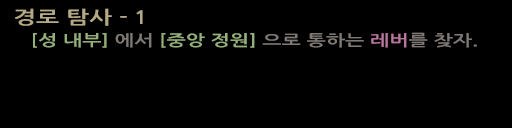
<style>
.page{position:relative;width:512px;height:128px;background:#000000}
.page>*{position:absolute;margin:0}
.t1{font:18px "NanumGothicBold";color:#b4aa86;scale:1.36 1}
.t2{font:15.4px "NanumGothicBold";color:#96af7b;scale:1.33 1}
.t3{font:15.4px "NanumGothicBold";color:#7e7974;scale:1.33 1}
.t4{font:15.4px "NanumGothicBold";color:#b8779d;scale:1.33 1}
</style>
<div class="page">
<p class="t1" style="left:15px;top:8px;width:128px;height:18px">경로 탐사 - 1</p>
<p class="t2" style="left:33px;top:32px;width:444px;height:16px">[성 내부] <span class="t3">에서 </span>[중앙 정원]<span class="t3"> 으로 통하는 </span><span class="t4">레버</span><span class="t3">를 찾자.</span></p>
</div>
